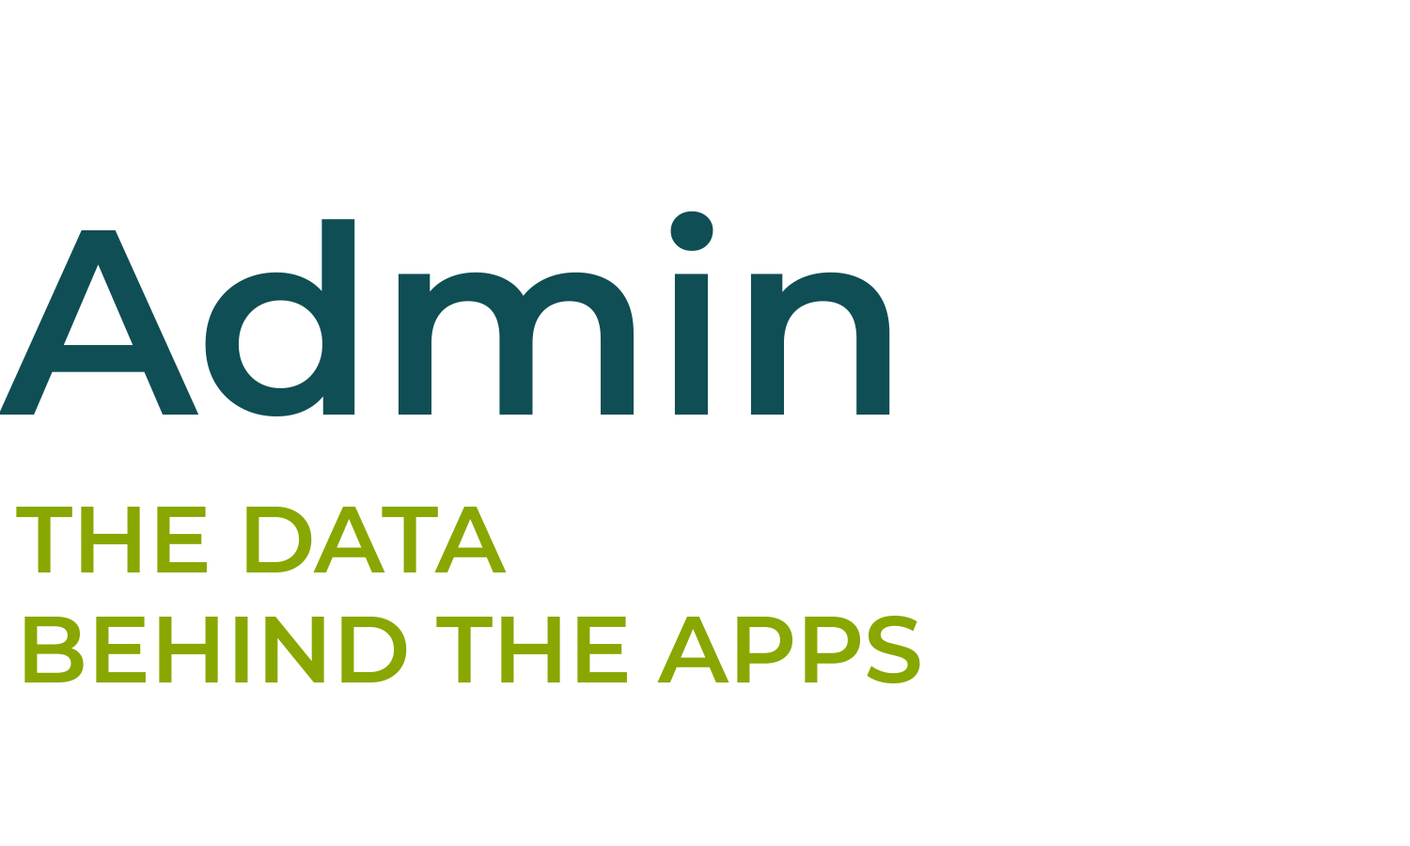
<style>
.page{position:relative;width:1410px;height:846px;background:#ffffff}
.page>*{position:absolute;margin:0}
.t1{font:263.1px "Montserrat-SemiBold";color:#0f4e54}
.t2{font:94px/0.2px "Montserrat-SemiBold";color:#88a700;text-transform:uppercase}
</style>
<div class="page">
<p class="t1" style="left:0px;top:211px;width:890px;height:205px">Admin</p>
<p class="t2" style="left:16px;top:507px;width:904px;height:176px">The Data<br>behind the apps</p>
</div>
